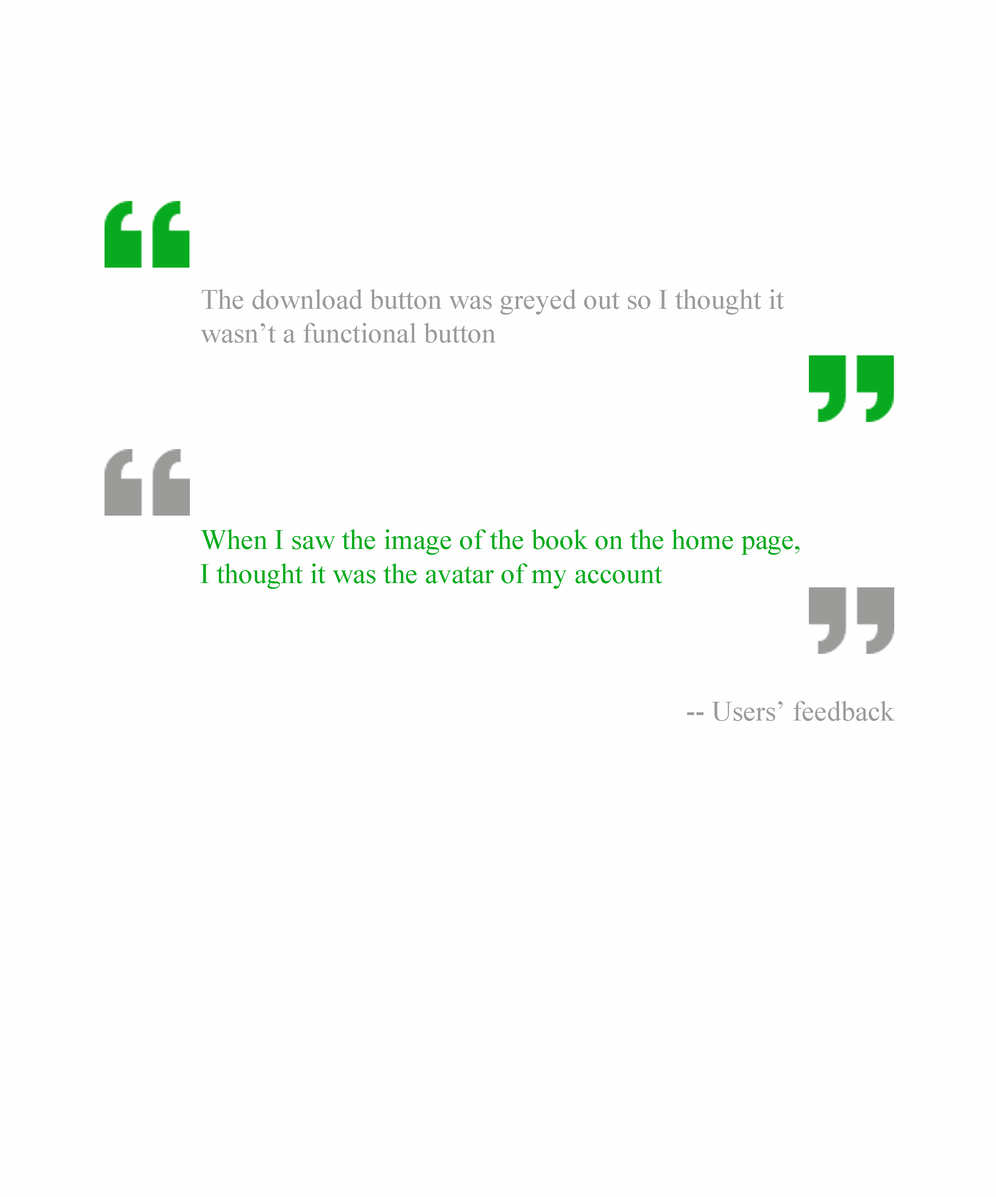
<style>
.page{position:relative;width:996px;height:1197px;background:#fffefe}
.page>*{position:absolute;margin:0}
.t1{font:28.2px "TimesNewRomanPSMT";color:#9b9b9a}
.t2{font:28.2px "TimesNewRomanPSMT";color:#08ab1f}
</style>
<div class="page">
<p class="t1" style="left:201px;top:289px;width:583px;height:54px">The download button was greyed out so I thought it <br>wasn’t a functional button</p>
<p class="t2" style="left:201px;top:529px;width:599px;height:60px">When I saw the image of the book on the home page, <br>I thought it was the avatar of my account</p>
<p class="t1" style="left:687px;top:701px;width:208px;height:20px">-- Users’ feedback</p>
</div>
